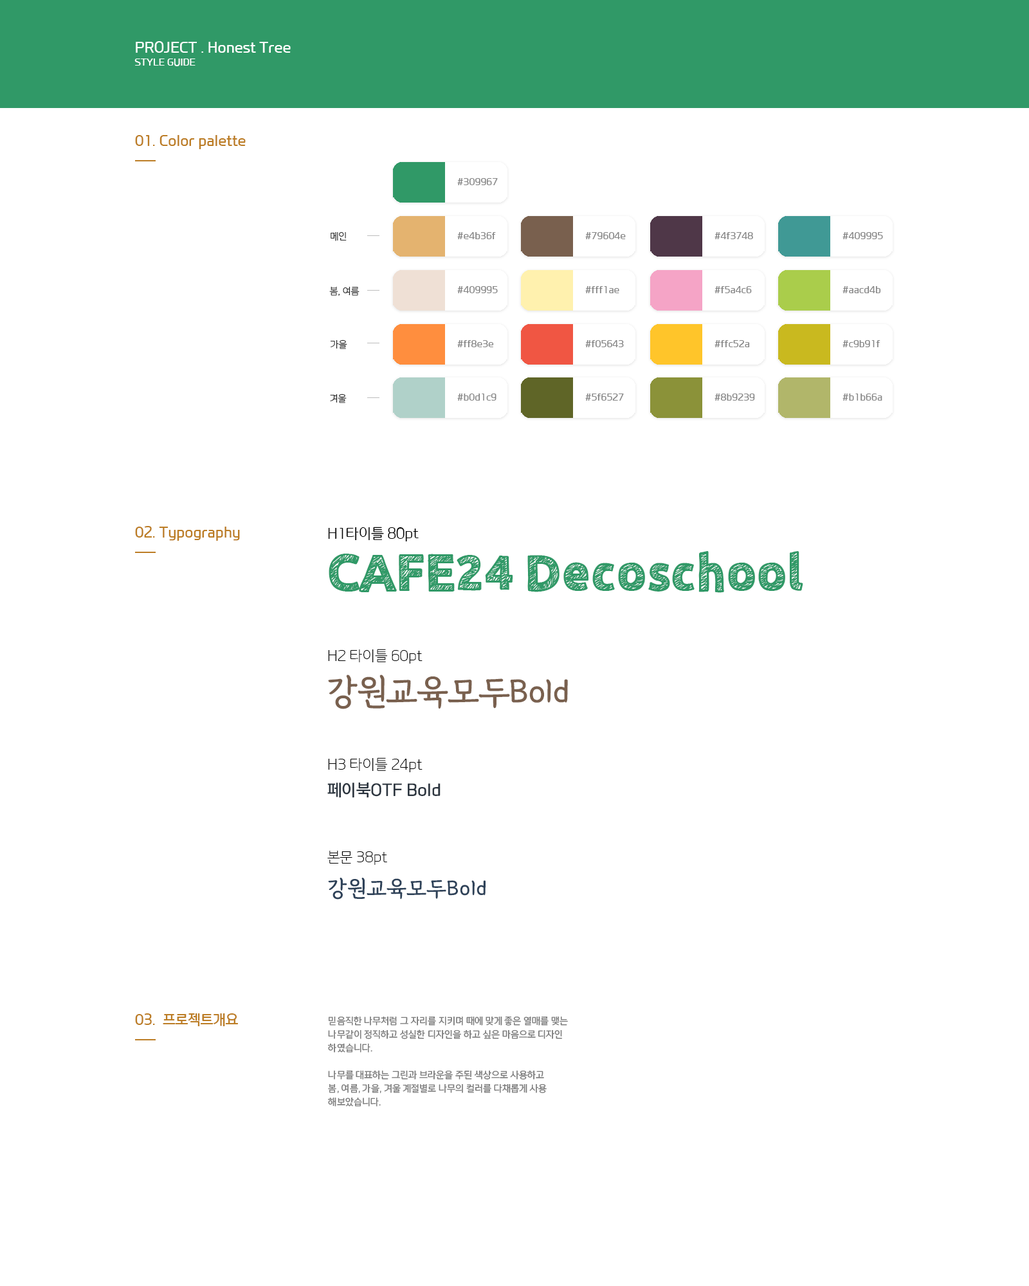
<style>
.page{position:relative;width:1029px;height:1286px;background:#ffffff}
.page>*{position:absolute;margin:0}
.t1{font:13.5px "payboocBold";color:#ffffff}
.t2{font:9px "payboocBold";color:#ffffff}
.t3{font:13.5px "payboocBold";color:#bc7d25}
.t4{font:9px "payboocBold";color:#878787}
.t5{font:9px "payboocMedium";color:#2b2b2b}
.t6{font:13.5px "payboocMedium";color:#000000}
.t7{font:51.4px "Cafe24Decoschool";color:#309967}
.t8{font:51.4px "Cafe24Decoschool";color:#309967;text-transform:uppercase}
.t9{font:13.5px "payboocLight";color:#000000}
.t10{font:38.6px "GangwonEduAllBold";letter-spacing:-0.025em;color:#79604e}
.t11{font:15.4px "payboocOTFBold";color:#2c353f}
.t12{font:24.4px "GangwonEduAllBold";color:#2d4158}
.t13{font:9px/13.5px "payboocOTFBold";color:#7b7b7b}
</style>
<div class="page">
<p class="t1" style="left:136px;top:41px;width:155px;height:12px">PROJECT . Honest Tree</p>
<p class="t2" style="left:134px;top:59px;width:61px;height:7px">STYLE GUIDE</p>
<p class="t3" style="left:135px;top:135px;width:111px;height:14px">01. Color palette</p>
<p class="t4" style="left:457px;top:178px;width:41px;height:7px">#309967</p>
<p class="t5" style="left:330px;top:232px;width:16px;height:9px">메인</p>
<p class="t4" style="left:457px;top:232px;width:39px;height:7px">#e4b36f</p>
<p class="t4" style="left:585px;top:232px;width:41px;height:7px">#79604e</p>
<p class="t4" style="left:714px;top:232px;width:39px;height:7px">#4f3748</p>
<p class="t4" style="left:842px;top:232px;width:41px;height:7px">#409995</p>
<p class="t5" style="left:329px;top:286px;width:30px;height:10px">봄, 여름</p>
<p class="t4" style="left:457px;top:286px;width:41px;height:7px">#409995</p>
<p class="t4" style="left:585px;top:286px;width:34px;height:7px">#fff1ae</p>
<p class="t4" style="left:714px;top:286px;width:38px;height:7px">#f5a4c6</p>
<p class="t4" style="left:842px;top:286px;width:39px;height:7px">#aacd4b</p>
<p class="t5" style="left:330px;top:339px;width:17px;height:10px">가을</p>
<p class="t4" style="left:457px;top:340px;width:37px;height:7px">#ff8e3e</p>
<p class="t4" style="left:585px;top:340px;width:39px;height:7px">#f05643</p>
<p class="t4" style="left:714px;top:340px;width:36px;height:7px">#ffc52a</p>
<p class="t4" style="left:842px;top:340px;width:38px;height:7px">#c9b91f</p>
<p class="t5" style="left:330px;top:393px;width:16px;height:10px">겨울</p>
<p class="t4" style="left:457px;top:393px;width:39px;height:8px">#b0d1c9</p>
<p class="t4" style="left:585px;top:393px;width:39px;height:8px">#5f6527</p>
<p class="t4" style="left:714px;top:393px;width:41px;height:8px">#8b9239</p>
<p class="t4" style="left:842px;top:393px;width:40px;height:8px">#b1b66a</p>
<p class="t3" style="left:135px;top:526px;width:105px;height:15px">02. Typography</p>
<p class="t6" style="left:328px;top:526px;width:91px;height:15px">H1타이틀 80pt</p>
<p class="t7" style="left:328px;top:551px;width:475px;height:42px"><span class="t8">cafe24 </span>Decoschool</p>
<p class="t9" style="left:328px;top:649px;width:94px;height:14px">H2 타이틀 60pt</p>
<p class="t10" style="left:328px;top:674px;width:240px;height:35px">강원교육모두Bold</p>
<p class="t9" style="left:328px;top:757px;width:94px;height:15px">H3 타이틀 24pt</p>
<p class="t11" style="left:327px;top:782px;width:113px;height:16px">페이북OTF Bold</p>
<p class="t9" style="left:327px;top:851px;width:60px;height:14px">본문 38pt</p>
<p class="t12" style="left:328px;top:878px;width:157px;height:21px">강원교육모두Bold</p>
<p class="t3" style="left:135px;top:1013px;width:103px;height:13px">03.  프로젝트개요</p>
<p class="t13" style="left:328px;top:1016px;width:240px;height:90px">믿음직한 나무처럼 그 자리를 지키며 때에 맞게 좋은 열매를 맺는 <br>나무같이 정직하고 성실한 디자인을 하고 싶은 마음으로 디자인<br>하였습니다.<br><br>나무를 대표하는 그린과 브라운을 주된 색상으로 사용하고<br>봄, 여름, 가을, 겨울 계절별로 나무의 컬러를 다채롭게 사용 해보았습니다.</p>
</div>
